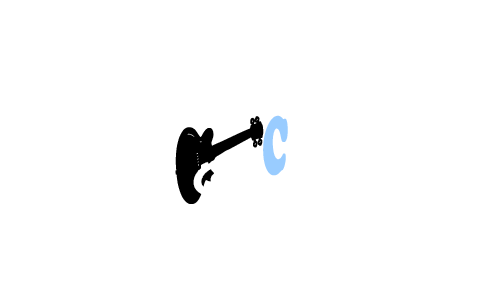
<style>
.page{position:relative;width:500px;height:300px;background:#ffffff}
.page>*{position:absolute;margin:0}
.t1{font:100.2px "DJ-Stringed-Regular";letter-spacing:0.22em;color:#000000;font-weight:bold;scale:0.43 1}
.t2{font:80.3px "CooperBlackStd";letter-spacing:0.22em;color:#99ccff;font-weight:bold;scale:0.4 1}
</style>
<div class="page">
<p class="t1" style="left:175px;top:116px;width:89px;height:88px;rotate:9deg">C</p>
<p class="t2" style="left:263px;top:115px;width:25px;height:61px;rotate:-4deg">C</p>
</div>
